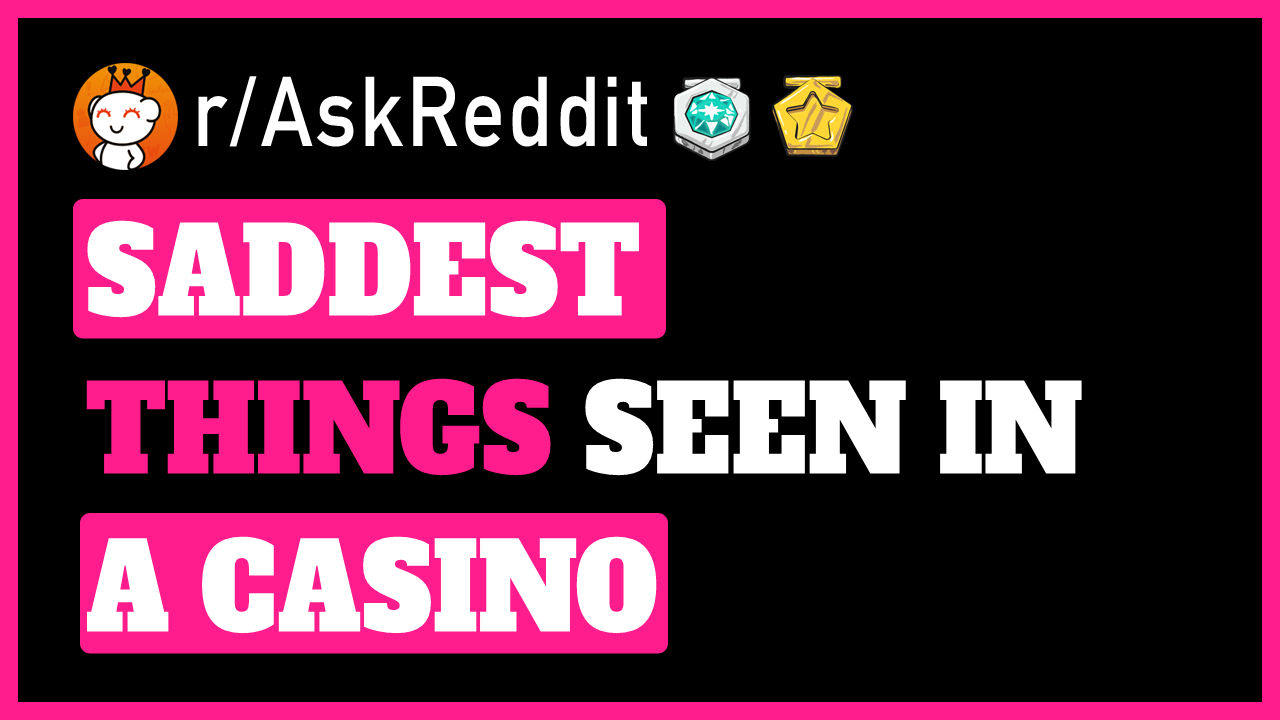
<style>
.page{position:relative;width:1280px;height:720px;background:#000000}
.page>*{position:absolute;margin:0}
.t1{font:97.2px "DINAlternate-Bold";letter-spacing:0.04em;color:#ffffff;scale:0.87 1}
.t2{font:97.2px "DINAlternate-Bold";letter-spacing:0.04em;color:#ffffff;text-transform:uppercase;scale:0.87 1}
.t3{font:119.7px/158px "AlfaSlabOne-Regular";color:#ffffff;text-transform:uppercase;scale:0.87 1}
.t4{font:119.7px/158px "AlfaSlabOne-Regular";color:#ff1d8d;text-transform:uppercase;scale:0.87 1}
</style>
<div class="page">
<p class="t1" style="left:198px;top:76px;width:449px;height:71px">r/<span class="t2">a</span>skReddit</p>
<p class="t3" style="left:86px;top:220px;width:996px;height:414px">Saddest <span class="t4">things </span>seen in a casino</p>
</div>
